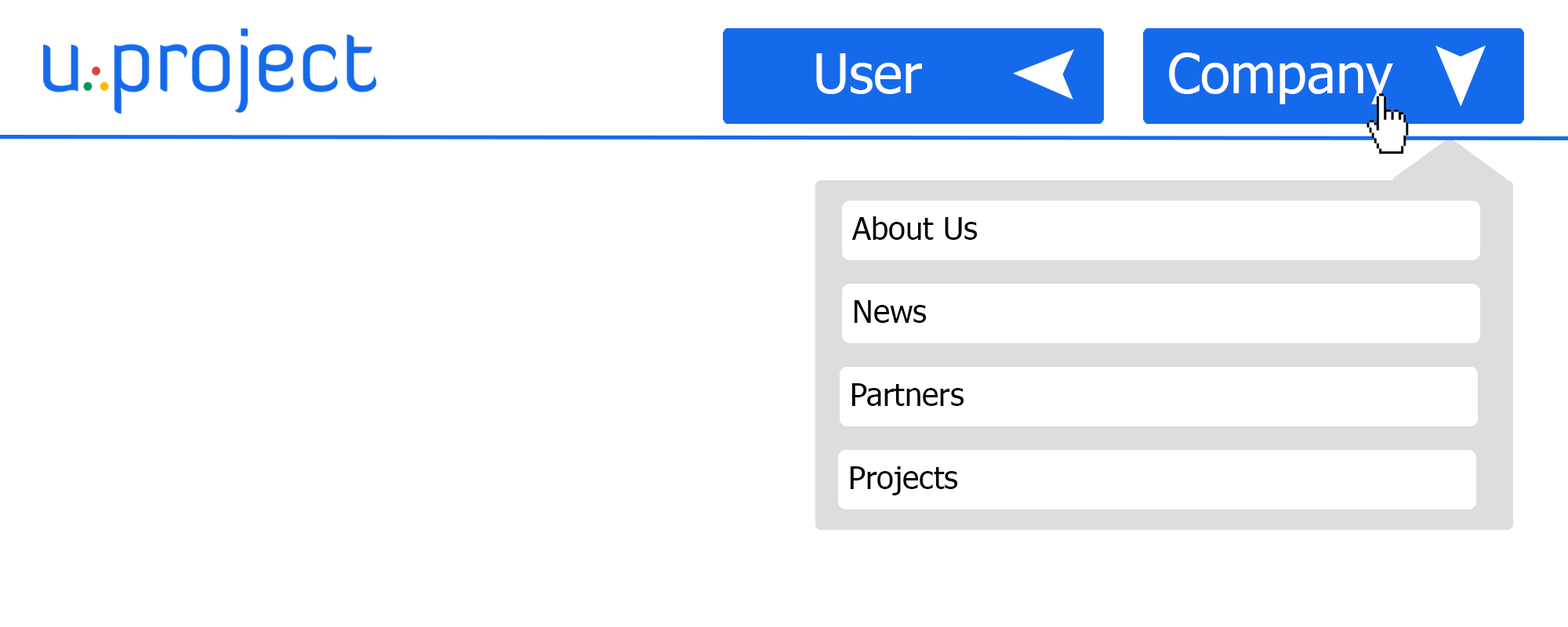
<style>
.page{position:relative;width:1568px;height:627px;background:#ffffff}
.page>*{position:absolute;margin:0}
.t1{font:54.9px "Tahoma";color:#ffffff}
.t2{font:31.4px "Tahoma";color:#000000}
</style>
<div class="page">
<p class="t1" style="left:816px;top:53px;width:106px;height:41px">User</p>
<p class="t1" style="left:1169px;top:53px;width:224px;height:51px">Company</p>
<p class="t2" style="left:851px;top:216px;width:127px;height:24px">About Us</p>
<p class="t2" style="left:855px;top:300px;width:72px;height:23px">News</p>
<p class="t2" style="left:851px;top:383px;width:113px;height:23px">Partners</p>
<p class="t2" style="left:851px;top:383px;width:113px;height:23px">Partners</p>
<p class="t2" style="left:850px;top:466px;width:108px;height:29px">Projects</p>
</div>
